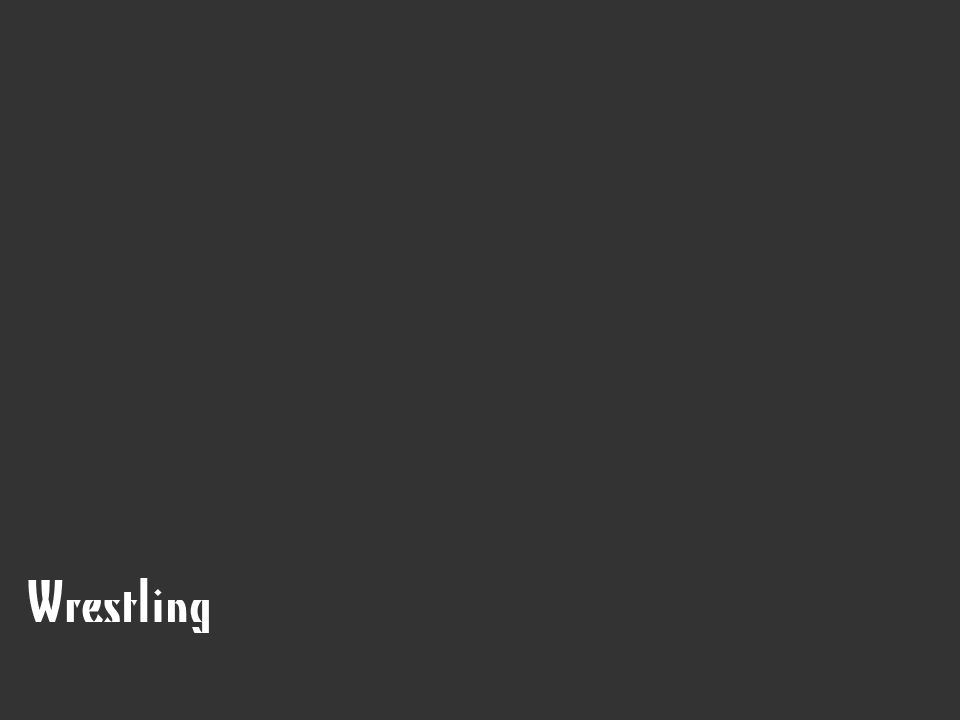
<style>
.page{position:relative;width:960px;height:720px;background:#333333}
.page>*{position:absolute;margin:0}
.t1{font:60px "KinoMT";color:#ffffff}
</style>
<div class="page">
<p class="t1" style="left:28px;top:578px;width:181px;height:55px">Wrestling</p>
</div>
